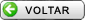
<style>
.page{position:relative;width:85px;height:20px}
.page>*{position:absolute;margin:0}
.t1{font:10px "ArialMT";letter-spacing:0.1em;color:#040404}
</style>
<div class="page">
<p class="t1" style="left:25px;top:6px;width:45px;height:9px">VOLTAR</p>
</div>
